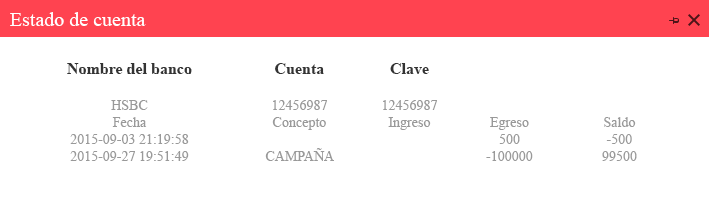
<style>
.page{position:relative;width:709px;height:201px;background:#ffffff}
.page>*{position:absolute;margin:0}
.t1{font:20px "TimesNewRomanPSMT";color:#ffffff}
.t2{font:14px "TimesNewRomanPSMT";color:#999999}
.t3{font:16px "TimesNewRomanPS-BoldMT";color:#333333}
</style>
<div class="page">
<p class="t1" style="left:10px;top:12px;width:136px;height:14px">Estado de cuenta</p>
<p class="t2" style="left:67px;top:63px;width:125px;height:98px;text-align:center"><span class="t3">Nombre del banco<br><br></span>HSBC<br>Fecha<br>2015-09-03 21:19:58<br>2015-09-27 19:51:49</p>
<p class="t2" style="left:265px;top:63px;width:69px;height:98px;text-align:center"><span class="t3">Cuenta<br><br></span>12456987<br>Concepto<br><br>CAMPAÑA</p>
<p class="t2" style="left:383px;top:63px;width:54px;height:67px;text-align:center"><span class="t3">Clave<br><br></span>12456987<br>Ingreso</p>
<p class="t2" style="left:486px;top:117px;width:47px;height:44px;text-align:center"><span class="t3"><br><br></span><br>Egreso<br>500<br>-100000</p>
<p class="t2" style="left:602px;top:117px;width:35px;height:44px;text-align:center"><span class="t3"><br><br></span><br>Saldo<br>-500<br>99500</p>
</div>
